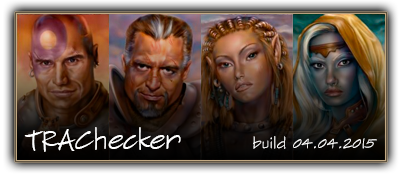
<style>
.page{position:relative;width:401px;height:174px}
.page>*{position:absolute;margin:0}
.t1{font:28px "SketchFlowPrint";letter-spacing:-0.025em;color:#ffffff}
.t2{font:15px "SketchFlowPrint";letter-spacing:-0.025em;color:#ffffff}
</style>
<div class="page">
<p class="t1" style="left:24px;top:127px;width:157px;height:25px">TRAChecker</p>
<p class="t2" style="left:253px;top:136px;width:124px;height:13px">build 04.04.2015</p>
</div>
